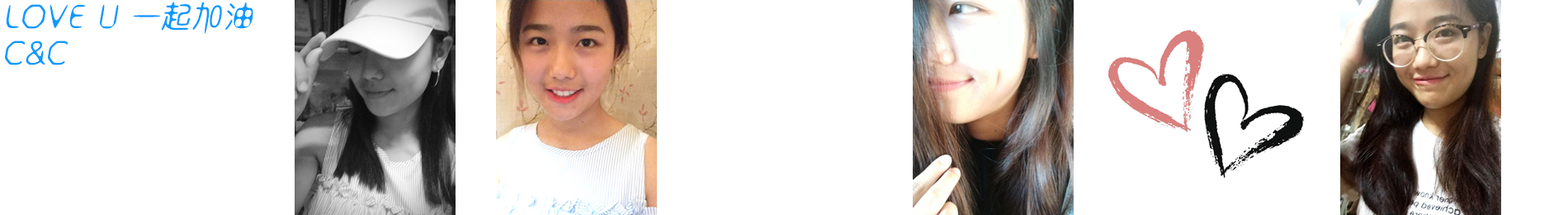
<style>
.page{position:relative;width:1568px;height:215px;background:#ffffff}
.page>*{position:absolute;margin:0}
.t1{font:31.7px/35.9px "Ð¡ÓÞ";color:#0c9afd;font-style:italic}
</style>
<div class="page">
<p class="t1" style="left:5px;top:2px;width:248px;height:63px">LOVE U 一起加油<br>C&amp;C</p>
</div>
